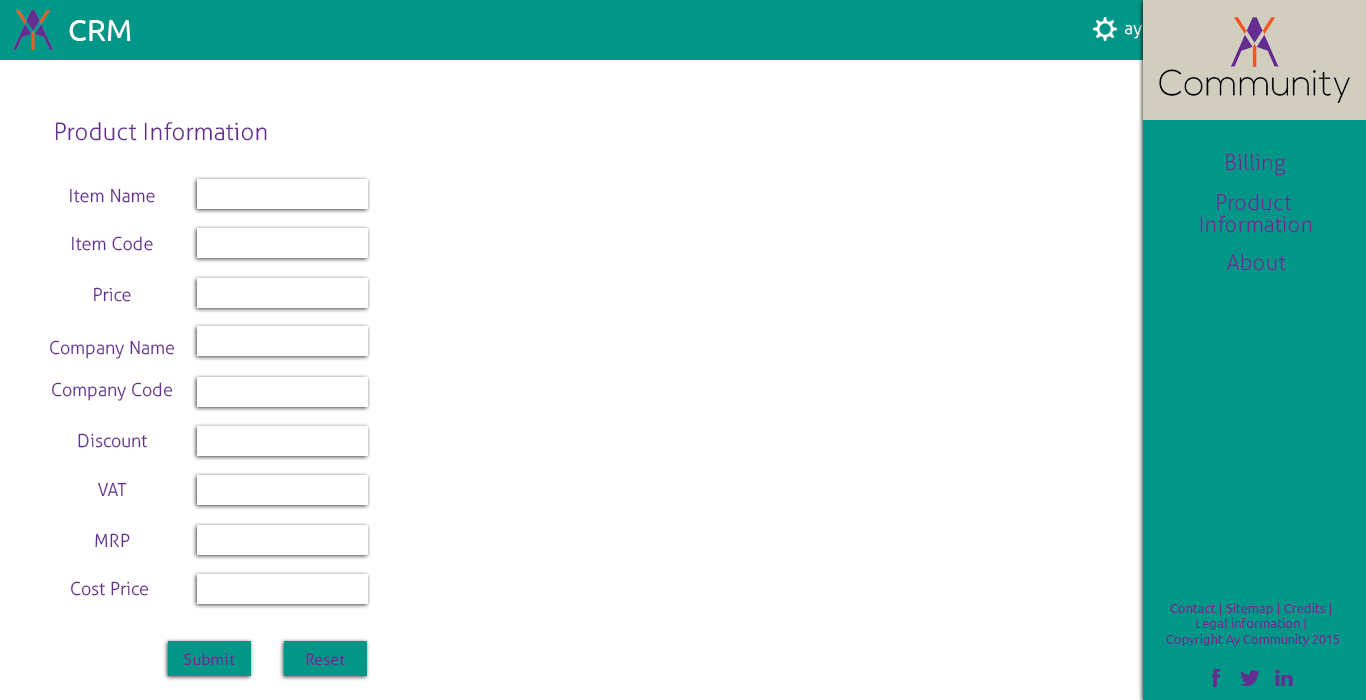
<style>
.page{position:relative;width:1366px;height:700px;background:#ffffff}
.page>*{position:absolute;margin:0}
.t1{font:30px "Ubuntu";color:#ffffff}
.t2{font:24px "Aller-Light";color:#662d91}
.t3{font:22px "Aller-Light";color:#662d91}
.t4{font:18px "Aller-Light";color:#662d91}
.t5{font:22px/22px "Aller-Light";color:#662d91}
.t6{font:13px "Ubuntu";color:#662d91}
.t7{font:16px "Aller";color:#662d91}
</style>
<div class="page">
<p class="t1" style="left:69px;top:20px;width:62px;height:21px">CRM</p>
<p class="t2" style="left:55px;top:122px;width:212px;height:19px">Product Information</p>
<p class="t3" style="left:1226px;top:153px;width:60px;height:23px">Billing</p>
<p class="t4" style="left:70px;top:188px;width:85px;height:15px">Item Name</p>
<p class="t5" style="left:1200px;top:193px;width:112px;height:40px;text-align:center">Product <br>Information</p>
<p class="t4" style="left:72px;top:236px;width:81px;height:15px">Item Code</p>
<p class="t3" style="left:1227px;top:253px;width:59px;height:18px">About</p>
<p class="t4" style="left:94px;top:287px;width:37px;height:15px">Price</p>
<p class="t4" style="left:50px;top:340px;width:125px;height:19px">Company Name</p>
<p class="t4" style="left:52px;top:382px;width:121px;height:19px">Company Code</p>
<p class="t4" style="left:78px;top:433px;width:69px;height:15px">Discount</p>
<p class="t4" style="left:98px;top:482px;width:29px;height:15px">VAT</p>
<p class="t4" style="left:95px;top:533px;width:35px;height:15px">MRP</p>
<p class="t4" style="left:71px;top:581px;width:78px;height:15px">Cost Price</p>
<p class="t6" style="left:1166px;top:603px;width:174px;height:43px;text-align:center">Contact | Sitemap | Credits | <br>Legal information | <br>Copyright Ay Community 2015</p>
<p class="t7" style="left:184px;top:653px;width:51px;height:13px">Submit</p>
<p class="t7" style="left:306px;top:653px;width:39px;height:13px">Reset</p>
</div>
